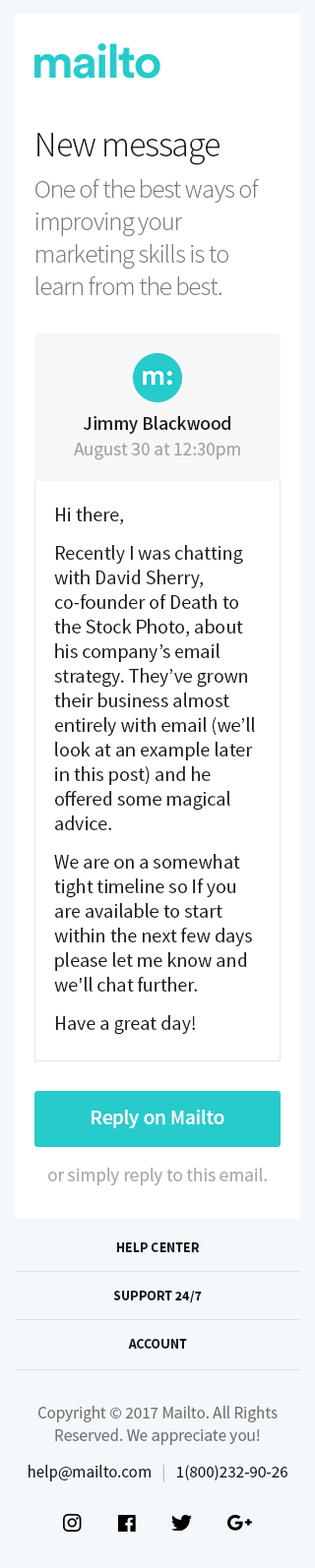
<style>
.page{position:relative;width:315px;height:1568px;background:#ffffff}
.page>*{position:absolute;margin:0}
.t1{font:35.4px "SourceSansPro-Light";letter-spacing:-0.03em;color:#1a1a1a}
.t2{font:25.6px/32.5px "SourceSansPro-Light";letter-spacing:-0.027em;color:#7b7b7b}
.t3{font:18.7px "SourceSansPro-Semibold";color:#1a1a1a}
.t4{font:18.7px "SourceSansPro-Regular";color:#a2a2a2}
.t5{font:19.7px/24.6px "SourceSansPro-Regular";color:#1a1a1a}
.t6{font:20.7px "SourceSansPro-Semibold";letter-spacing:-0.009em;color:#ffffff}
.t7{font:18.7px "SourceSansPro-Regular";color:#a7a7a7}
.t8{font:13.8px/48.2px "SourceSansPro-Bold";color:#1a1a1a}
.t9{font:16.7px/22.6px "SourceSansPro-Regular";color:#727374}
.t10{font:16.7px/22.6px "SourceSansPro-Regular";color:#1a1a1a}
.t11{font:16.7px/22.6px "SourceSansPro-Regular";color:#bebebe}
</style>
<div class="page">
<p class="t1" style="left:37px;top:133px;width:182px;height:32px">New message</p>
<p class="t2" style="left:35px;top:179px;width:224px;height:116px">One of the best ways of <br>improving your  <br>marketing skills is to <br>learn from the best.</p>
<p class="t3" style="left:83px;top:416px;width:147px;height:18px">Jimmy Blackwood</p>
<p class="t4" style="left:74px;top:443px;width:166px;height:17px">August 30 at 12:30pm</p>
<p class="t5" style="left:54px;top:507px;width:201px;height:528px">Hi there,<br>Recently I was chatting with David Sherry, co-founder of Death to the Stock Photo, about his company’s email strategy. They’ve grown their business almost entirely with email (we’ll look at an example later in this post) and he offered some magical advice.<br>We are on a somewhat tight timeline so If you are available to start within the next few days please let me know and we'll chat further.<br>Have a great day!</p>
<p class="t6" style="left:91px;top:1110px;width:133px;height:18px">Reply on Mailto</p>
<p class="t7" style="left:48px;top:1168px;width:219px;height:17px">or simply reply to this email.</p>
<p class="t8" style="left:113px;top:1242px;width:89px;height:107px;text-align:center">HELP CENTER<br>SUPPORT 24/7<br>ACCOUNT</p>
<p class="t9" style="left:29px;top:1406px;width:258px;height:76px;text-align:center">Copyright © 2017 Mailto. All Rights Reserved. We appreciate you!<br><span class="t10">help@mailto.com   </span><span class="t11">|   </span><span class="t10">1(800)232-90-26</span></p>
</div>
